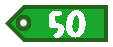
<style>
.page{position:relative;width:113px;height:47px;background:#ffffff}
.page>*{position:absolute;margin:0}
.t1{font:43.3px "BaksoSapi";letter-spacing:-0.12em;color:#ffffff}
</style>
<div class="page">
<p class="t1" style="left:49px;top:10px;width:37px;height:28px;rotate:-2deg">50</p>
</div>
